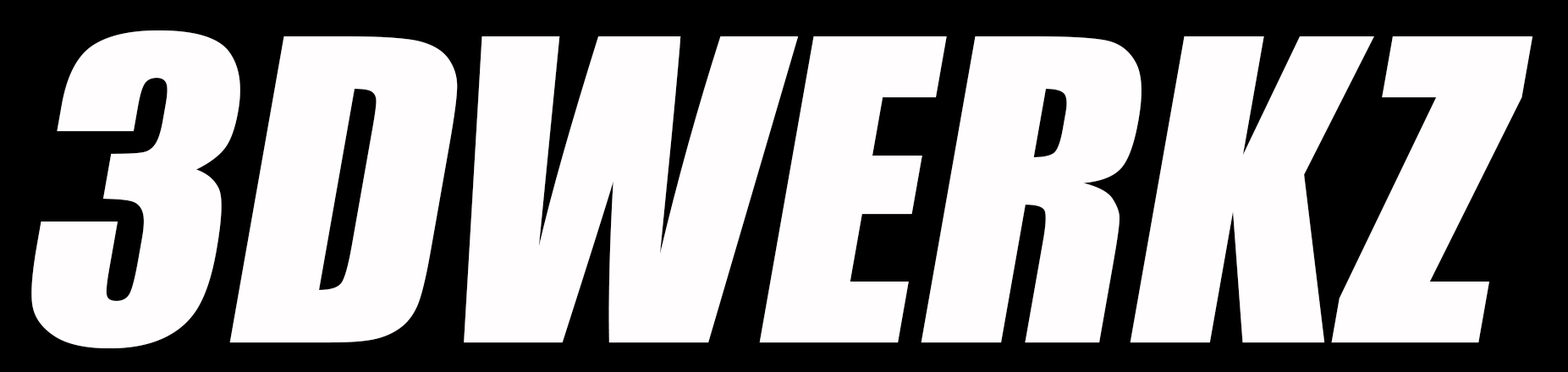
<style>
.page{position:relative;width:1568px;height:372px;background:#fffdfd}
.page>*{position:absolute;margin:0}
.t1{font:387.8px "Impact";color:#fffdfd;font-style:italic}
</style>
<div class="page">
<p class="t1" style="left:31px;top:30px;width:1502px;height:319px">3DWERKZ</p>
</div>
